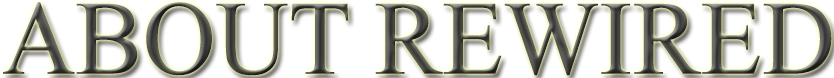
<style>
.page{position:relative;width:834px;height:78px;background:#ffffff}
.page>*{position:absolute;margin:0}
.t1{font:105.5px "TimesNewRomanPSMT";scale:0.96 1}
</style>
<div class="page">
<p class="t1" style="left:3px;top:2px;width:829px;height:74px">ABOUT REWIRED</p>
</div>
